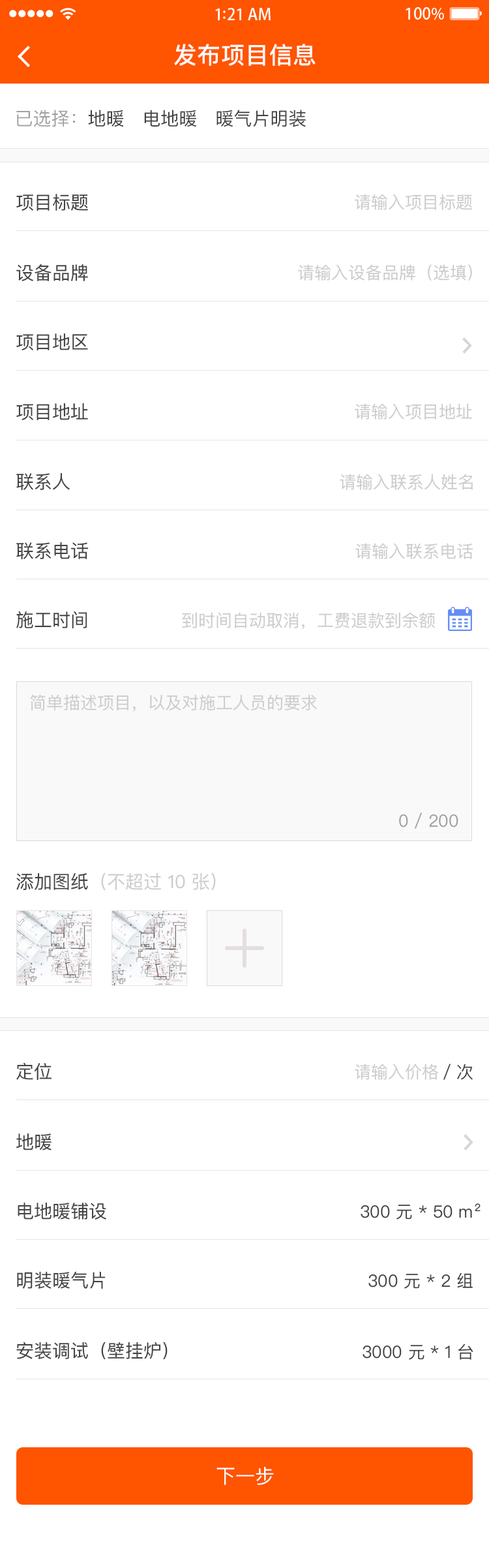
<style>
.page{position:relative;width:489px;height:1568px;background:#ffffff}
.page>*{position:absolute;margin:0}
.t1{font:23.5px "PingFangSC-Medium";letter-spacing:0.02em;color:#ffffff}
.t2{font:18.3px "PingFangSC-Regular";color:#434343;text-transform:uppercase}
.t3{font:18.3px "PingFangSC-Regular";color:#a0a0a0;text-transform:uppercase}
.t4{font:18.3px "PingFangSC-Regular";color:#434343}
.t5{font:17px "PingFangSC-Regular";color:#cccccc}
.t6{font:17px "PingFangSC-Regular";color:#a0a0a0}
.t7{font:18.3px "PingFangSC-Regular";color:#cccccc}
.t8{font:17px "PingFangSC-Regular";color:#434343}
.t9{font:19.6px "PingFangSC-Regular";color:#ffffff;text-transform:uppercase}
</style>
<div class="page">
<p class="t1" style="left:174px;top:44px;width:142px;height:22px">发布项目信息</p>
<p class="t2" style="left:16px;top:110px;width:290px;height:17px"><span class="t3">已选择：</span>地暖   电地暖   暖气片明装</p>
<p class="t4" style="left:16px;top:194px;width:72px;height:17px">项目标题</p>
<p class="t5" style="left:355px;top:194px;width:117px;height:16px">请输入项目标题</p>
<p class="t4" style="left:16px;top:264px;width:72px;height:17px">设备品牌</p>
<p class="t5" style="left:298px;top:264px;width:174px;height:17px">请输入设备品牌（选填）</p>
<p class="t4" style="left:16px;top:333px;width:72px;height:17px">项目地区</p>
<p class="t4" style="left:16px;top:403px;width:72px;height:17px">项目地址</p>
<p class="t5" style="left:355px;top:403px;width:117px;height:17px">请输入项目地址</p>
<p class="t4" style="left:16px;top:473px;width:54px;height:18px">联系人</p>
<p class="t5" style="left:340px;top:474px;width:133px;height:16px">请输入联系人姓名</p>
<p class="t4" style="left:16px;top:542px;width:73px;height:18px">联系电话</p>
<p class="t5" style="left:356px;top:543px;width:118px;height:16px">请输入联系电话</p>
<p class="t4" style="left:16px;top:611px;width:71px;height:17px">施工时间</p>
<p class="t5" style="left:182px;top:612px;width:254px;height:18px">到时间自动取消，工费退款到余额</p>
<p class="t5" style="left:30px;top:694px;width:287px;height:18px">简单描述项目，以及对施工人员的要求</p>
<p class="t6" style="left:399px;top:812px;width:60px;height:17px">0 / 200</p>
<p class="t7" style="left:16px;top:872px;width:200px;height:19px"><span class="t4">添加图纸</span>（不超过 10 张）</p>
<p class="t4" style="left:16px;top:1062px;width:36px;height:18px">定位</p>
<p class="t5" style="left:355px;top:1064px;width:83px;height:16px">请输入价格</p>
<p class="t8" style="left:444px;top:1064px;width:29px;height:16px">/ 次</p>
<p class="t4" style="left:16px;top:1133px;width:36px;height:17px">地暖</p>
<p class="t4" style="left:18px;top:1203px;width:88px;height:17px">电地暖铺设</p>
<p class="t8" style="left:361px;top:1203px;width:120px;height:17px">300 元 * 50 m²</p>
<p class="t4" style="left:17px;top:1272px;width:89px;height:17px">明装暖气片</p>
<p class="t8" style="left:369px;top:1272px;width:104px;height:17px">300 元 * 2 组</p>
<p class="t4" style="left:16px;top:1342px;width:152px;height:18px">安装调试（壁挂炉）</p>
<p class="t8" style="left:363px;top:1344px;width:111px;height:16px">3000 元 * 1 台</p>
<p class="t9" style="left:217px;top:1467px;width:57px;height:18px">下一步</p>
</div>
